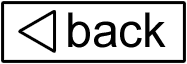
<style>
.page{position:relative;width:187px;height:64px;background:#ffffff}
.page>*{position:absolute;margin:0}
.t1{font:48px "ArialMT";color:#010101}
</style>
<div class="page">
<p class="t1" style="left:68px;top:12px;width:98px;height:36px">back</p>
</div>
